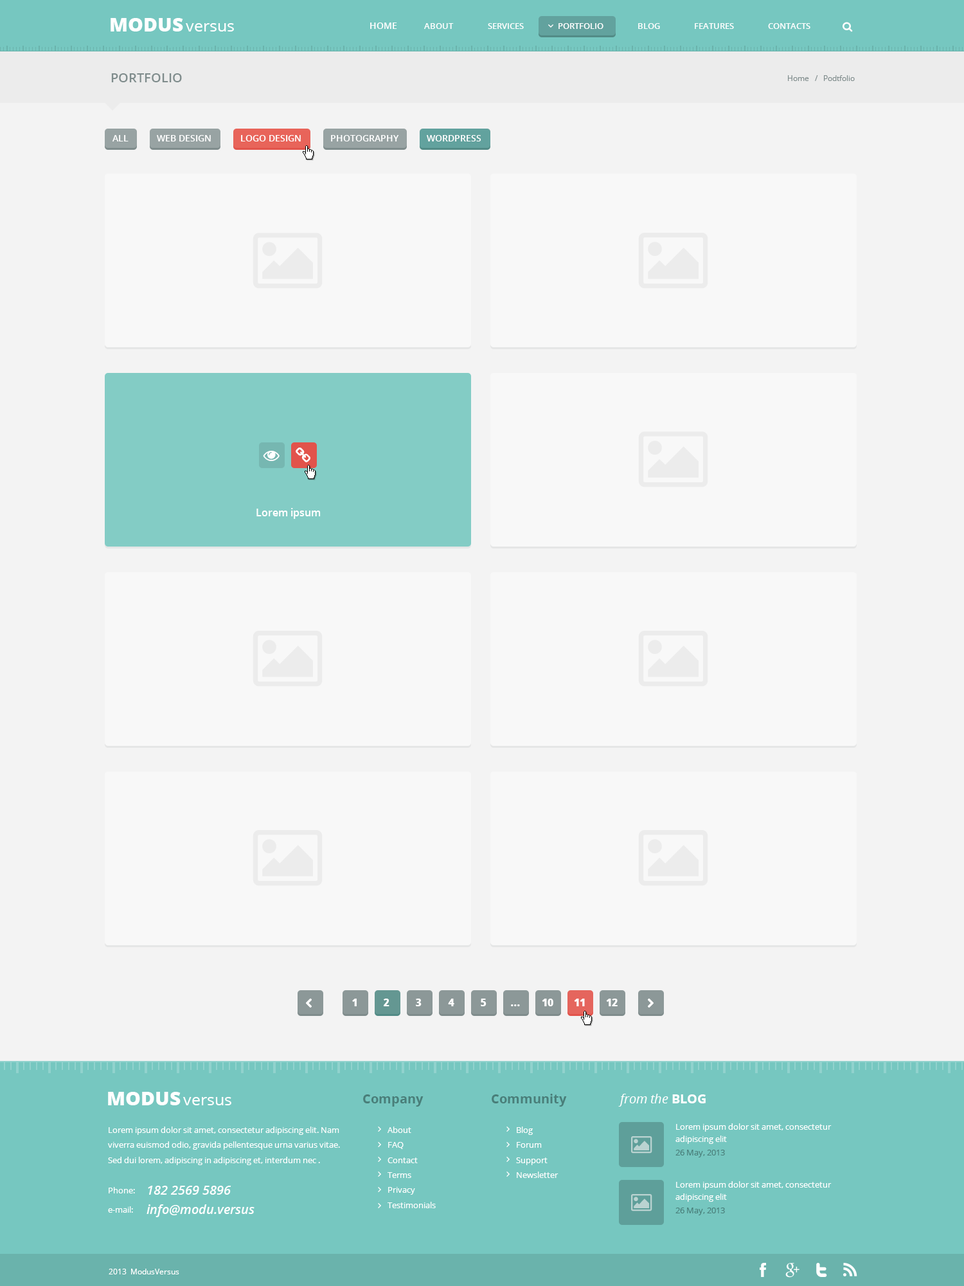
<style>
.page{position:relative;width:964px;height:1286px;background:#f8f8f8}
.page>*{position:absolute;margin:0}
.t1{font:19.3px "OpenSans-Extrabold";color:#ffffff}
.t2{font:16.1px "OpenSans";color:#ffffff}
.t3{font:9px "OpenSans-Semibold";color:#ffffff}
.t4{font:8.4px "OpenSans-Semibold";color:#ffffff}
.t5{font:12.9px "OpenSans-Semibold";color:#7f8c8c}
.t6{font:7.7px "OpenSans";color:#7f8c8c}
.t7{font:10.3px "OpenSans-Semibold";color:#ffffff}
.t8{font:10.3px "OpenSans-Extrabold";color:#ffffff}
.t9{font:12.9px "OpenSans-Bold";color:#497e79}
.t10{font:12.9px "OpenSans-Italic";color:#ffffff}
.t11{font:12.9px "OpenSans-Bold";color:#ffffff}
.t12{font:8.4px/15px "OpenSans";color:#ffffff}
.t13{font:8.4px/12.5px "OpenSans";color:#ffffff}
.t14{font:8.4px "OpenSans";color:#497e79}
.t15{font:8.4px "OpenSans";color:#ffffff}
.t16{font:12.9px "OpenSans-SemiboldItalic";color:#ffffff}
.t17{font:7.7px "OpenSans";color:#ffffff}
</style>
<div class="page">
<p class="t1" style="left:111px;top:18px;width:72px;height:14px">MODUS</p>
<p class="t2" style="left:186px;top:23px;width:48px;height:9px">versus</p>
<p class="t3" style="left:370px;top:22px;width:27px;height:7px">HOME</p>
<p class="t4" style="left:424px;top:23px;width:30px;height:6px">ABOUT</p>
<p class="t4" style="left:488px;top:23px;width:36px;height:6px">SERVICES</p>
<p class="t4" style="left:559px;top:23px;width:45px;height:6px">PORTFOLIO</p>
<p class="t4" style="left:638px;top:23px;width:22px;height:6px">BLOG</p>
<p class="t4" style="left:695px;top:23px;width:39px;height:6px">FEATURES</p>
<p class="t4" style="left:768px;top:23px;width:43px;height:6px">CONTACTS</p>
<p class="t5" style="left:111px;top:73px;width:71px;height:9px">PORTFOLIO</p>
<p class="t6" style="left:788px;top:75px;width:67px;height:6px">Home   /   Podtfolio</p>
<p class="t3" style="left:113px;top:135px;width:16px;height:6px">ALL</p>
<p class="t3" style="left:157px;top:135px;width:54px;height:6px">WEB DESIGN</p>
<p class="t3" style="left:241px;top:135px;width:60px;height:6px">LOGO DESIGN</p>
<p class="t3" style="left:331px;top:135px;width:68px;height:6px">PHOTOGRAPHY</p>
<p class="t3" style="left:427px;top:135px;width:55px;height:6px">WORDPRESS</p>
<p class="t7" style="left:256px;top:508px;width:65px;height:11px">Lorem ipsum</p>
<p class="t8" style="left:352px;top:998px;width:5px;height:8px">1</p>
<p class="t8" style="left:384px;top:998px;width:6px;height:8px">2</p>
<p class="t8" style="left:416px;top:998px;width:6px;height:8px">3</p>
<p class="t8" style="left:448px;top:998px;width:7px;height:8px">4</p>
<p class="t8" style="left:481px;top:998px;width:6px;height:8px">5</p>
<p class="t8" style="left:542px;top:998px;width:12px;height:8px">10</p>
<p class="t8" style="left:574px;top:998px;width:11px;height:8px">11</p>
<p class="t8" style="left:606px;top:998px;width:12px;height:8px">12</p>
<p class="t8" style="left:511px;top:1004px;width:9px;height:2px">...</p>
<p class="t1" style="left:108px;top:1092px;width:73px;height:13px">MODUS</p>
<p class="t2" style="left:183px;top:1097px;width:48px;height:8px">versus</p>
<p class="t9" style="left:363px;top:1094px;width:61px;height:12px">Company</p>
<p class="t9" style="left:492px;top:1094px;width:75px;height:12px">Community</p>
<p class="t10" style="left:618px;top:1094px;width:88px;height:12px">from the <span class="t11">BLOG</span></p>
<p class="t12" style="left:108px;top:1126px;width:232px;height:39px">Lorem ipsum dolor sit amet, consectetur adipiscing elit. Nam viverra euismod odio, gravida pellentesque urna varius vitae. Sed dui lorem, adipiscing in adipiscing et, interdum nec .</p>
<p class="t12" style="left:388px;top:1126px;width:48px;height:82px">About<br>FAQ<br>Contact<br>Terms<br>Privacy<br>Testimonials</p>
<p class="t12" style="left:516px;top:1126px;width:43px;height:52px">Blog<br>Forum<br>Support<br>Newsletter</p>
<p class="t13" style="left:676px;top:1123px;width:156px;height:21px">Lorem ipsum dolor sit amet, consectetur adipiscing elit</p>
<p class="t14" style="left:676px;top:1149px;width:49px;height:8px">26 May, 2013</p>
<p class="t13" style="left:676px;top:1181px;width:156px;height:21px">Lorem ipsum dolor sit amet, consectetur adipiscing elit</p>
<p class="t15" style="left:109px;top:1187px;width:26px;height:6px">Phone:</p>
<p class="t16" style="left:148px;top:1185px;width:83px;height:9px">182 2569 5896</p>
<p class="t15" style="left:108px;top:1206px;width:25px;height:6px">e-mail:</p>
<p class="t16" style="left:147px;top:1204px;width:108px;height:13px">info@modu.versus</p>
<p class="t14" style="left:676px;top:1207px;width:49px;height:8px">26 May, 2013</p>
<p class="t17" style="left:109px;top:1268px;width:70px;height:6px">2013  ModusVersus</p>
</div>
